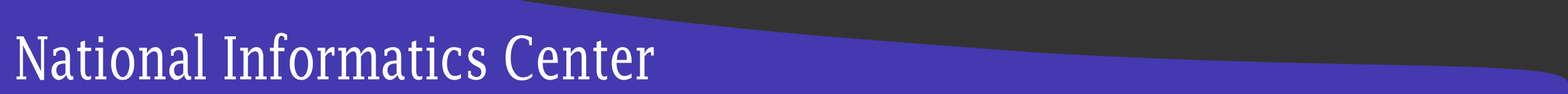
<style>
.page{position:relative;width:1568px;height:94px;background:#4439af}
.page>*{position:absolute;margin:0}
.t1{font:59.4px "LucidaFax";color:#ffffff;scale:0.77 1}
</style>
<div class="page">
<p class="t1" style="left:16px;top:33px;width:638px;height:48px">National Informatics Center</p>
</div>
